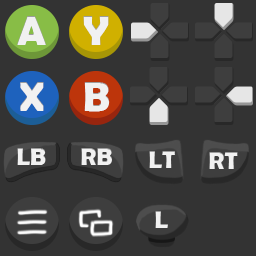
<style>
.page{position:relative;width:256px;height:256px;background:#333333}
.page>*{position:absolute;margin:0}
.t1{font:41.7px "BerlinSansFBDemi-Bold";color:#f1f1f1}
.t2{font:25px "BerlinSansFBDemi-Bold";color:#f1f1f1}
</style>
<div class="page">
<p class="t1" style="left:17px;top:16px;width:29px;height:29px">A</p>
<p class="t1" style="left:83px;top:16px;width:26px;height:29px">Y</p>
<p class="t1" style="left:20px;top:82px;width:24px;height:29px">X</p>
<p class="t1" style="left:84px;top:82px;width:26px;height:30px">B</p>
<p class="t2" style="left:17px;top:148px;width:29px;height:17px">LB</p>
<p class="t2" style="left:81px;top:148px;width:31px;height:17px">RB</p>
<p class="t2" style="left:149px;top:151px;width:26px;height:17px">LT</p>
<p class="t2" style="left:209px;top:152px;width:29px;height:17px">RT</p>
<p class="t2" style="left:155px;top:211px;width:13px;height:17px">L</p>
</div>
